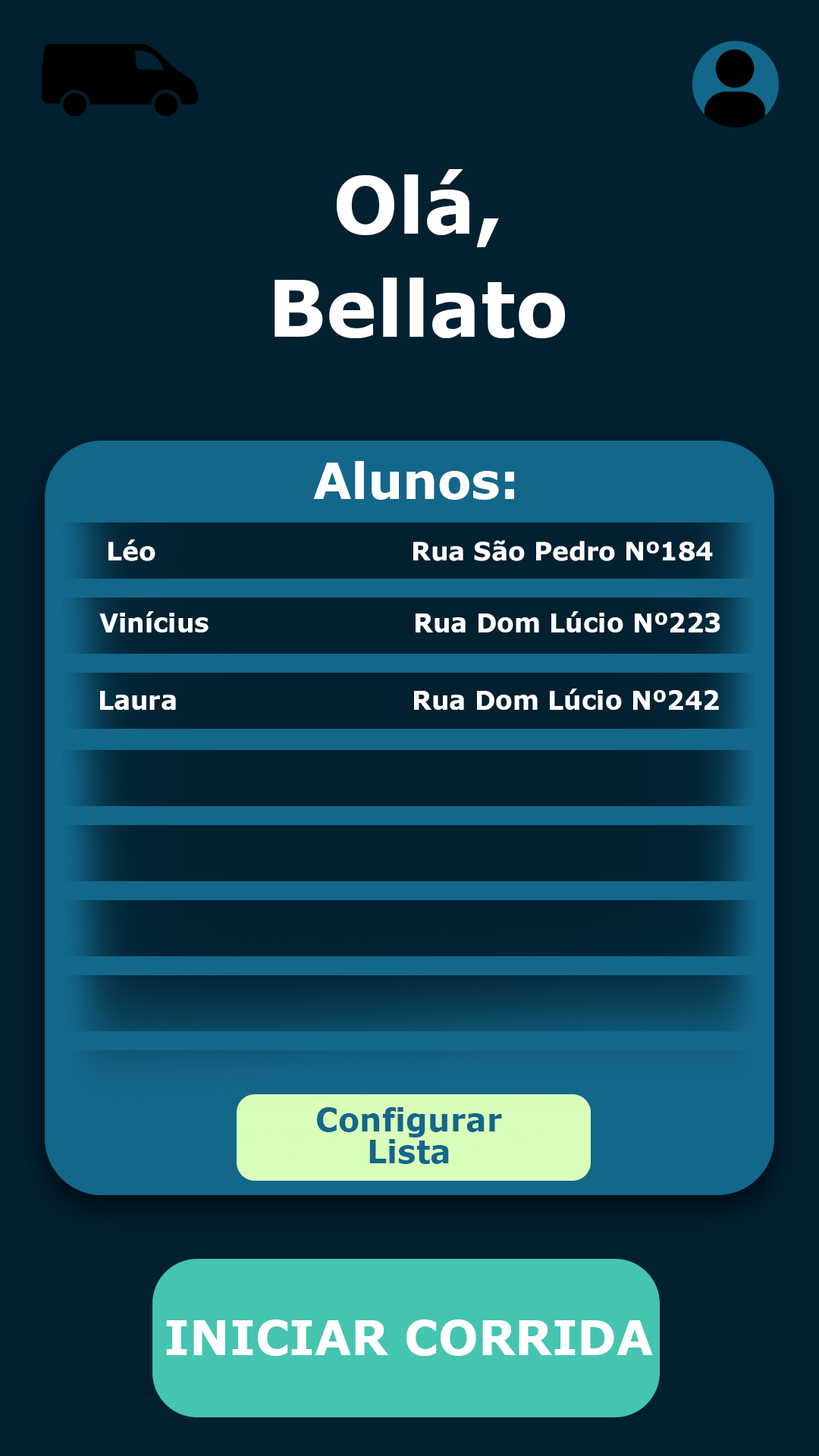
<style>
.page{position:relative;width:819px;height:1456px;background:#012030}
.page>*{position:absolute;margin:0}
.t1{font:77.7px/102.8px "Verdana-Bold";color:#ffffff}
.t2{font:49.7px "Verdana-Bold";color:#ffffff}
.t3{font:25.4px "Verdana-Bold";color:#ffffff}
.t4{font:25.5px "Verdana-Bold";color:#ffffff}
.t5{font:31.8px/31.6px "Verdana-Bold";color:#13678a}
.t6{font:47.8px "Verdana-Bold";color:#ffffff}
</style>
<div class="page">
<p class="t1" style="left:275px;top:169px;width:291px;height:169px;text-align:center">Olá,<br>Bellato</p>
<p class="t2" style="left:313px;top:461px;width:201px;height:39px">Alunos:</p>
<p class="t3" style="left:108px;top:539px;width:605px;height:22px">Léo            Rua São Pedro Nº184</p>
<p class="t4" style="left:99px;top:611px;width:621px;height:21px">Vinícius            Rua Dom Lúcio Nº223</p>
<p class="t4" style="left:100px;top:689px;width:619px;height:21px">Laura             Rua Dom Lúcio Nº242</p>
<p class="t5" style="left:317px;top:1107px;width:185px;height:57px;text-align:center">Configurar<br>Lista</p>
<p class="t6" style="left:166px;top:1319px;width:487px;height:37px">INICIAR CORRIDA</p>
</div>
